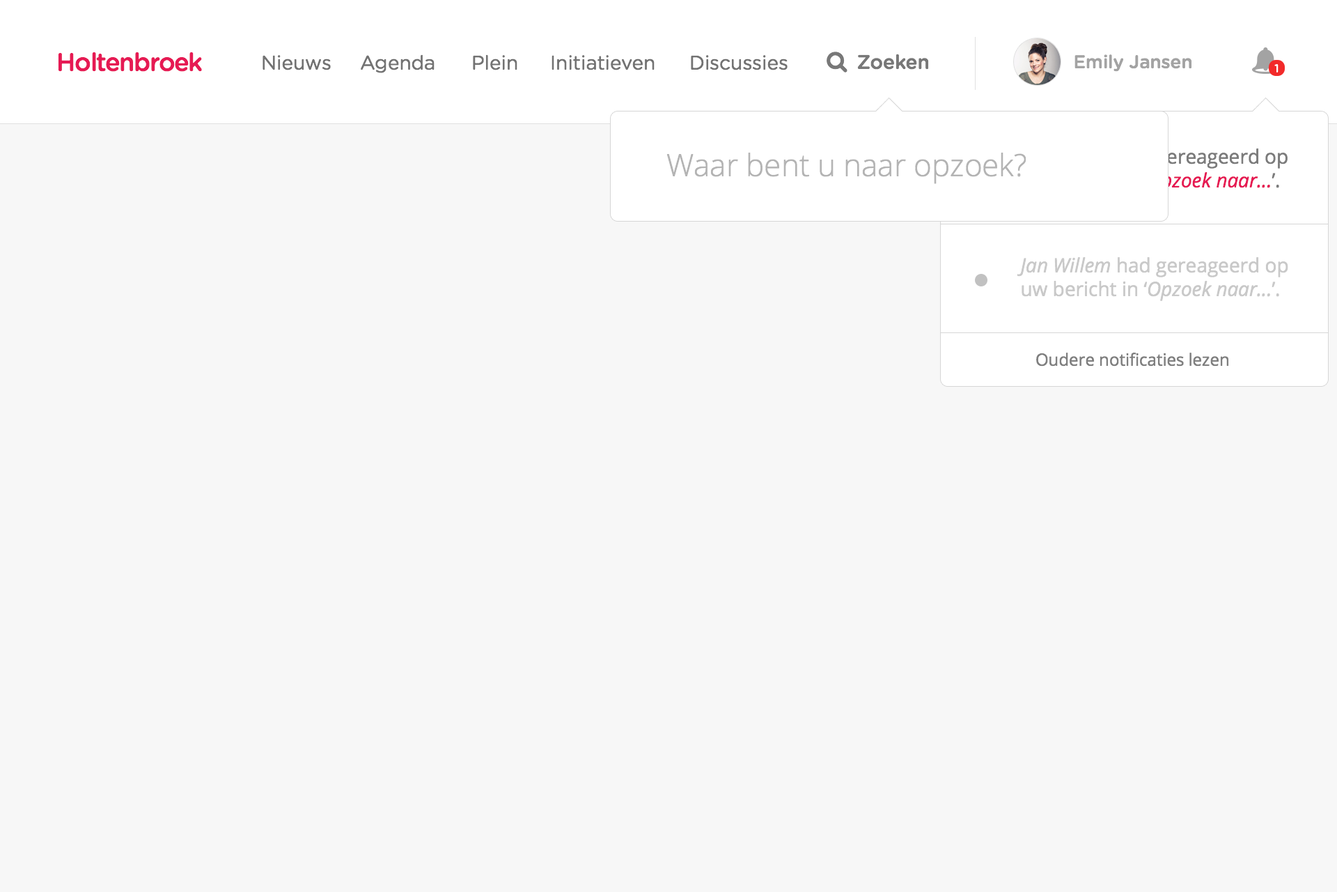
<style>
.page{position:relative;width:1337px;height:892px;background:#f7f7f7}
.page>*{position:absolute;margin:0}
.t1{font:25.1px "GothamRounded-Medium";letter-spacing:-0.04em;color:#e61a54}
.t2{font:19.5px "GothamRounded-Medium";color:#787878}
.t3{font:19.5px "GothamRounded-Book";color:#737373}
.t4{font:18.1px "GothamRounded-Medium";color:#a3a3a3}
.t5{font:11.4px "GothamRounded-Medium";color:#ffffff}
.t6{font:19.5px "OpenSans"}
.t7{font:19.5px "OpenSans-Italic"}
.t8{font:30.6px "OpenSans-Light";color:#b4b4b4}
.t9{font:19.5px "OpenSans";color:#c9c9c9}
.t10{font:19.5px "OpenSans-Italic";color:#c9c9c9}
.t11{font:16.7px "OpenSans";color:#808080}
</style>
<div class="page">
<p class="t1" style="left:58px;top:52px;width:144px;height:20px">Holtenbroek</p>
<p class="t2" style="left:857px;top:54px;width:72px;height:16px">Zoeken</p>
<p class="t3" style="left:263px;top:55px;width:68px;height:15px">Nieuws</p>
<p class="t3" style="left:361px;top:54px;width:74px;height:19px">Agenda</p>
<p class="t3" style="left:473px;top:54px;width:45px;height:16px">Plein</p>
<p class="t3" style="left:552px;top:55px;width:103px;height:15px">Initiatieven</p>
<p class="t3" style="left:691px;top:55px;width:97px;height:15px">Discussies</p>
<p class="t4" style="left:1075px;top:54px;width:118px;height:18px">Emily Jansen</p>
<p class="t5" style="left:1275px;top:64px;width:4px;height:8px">1</p>
<p class="t6" style="left:1019px;top:148px;width:269px;height:44px"><span class="t7">Anna Lee</span> heeft gereageerd op <br>uw bericht in ‘<span class="t7">Opzoek naar...</span>’.</p>
<p class="t8" style="left:667px;top:153px;width:360px;height:31px">Waar bent u naar opzoek?</p>
<p class="t9" style="left:1017px;top:257px;width:272px;height:44px"><span class="t10">Jan Willem</span> had gereageerd op <br>uw bericht in ‘<span class="t10">Opzoek naar...</span>’.</p>
<p class="t11" style="left:1036px;top:352px;width:193px;height:14px">Oudere notificaties lezen</p>
</div>
